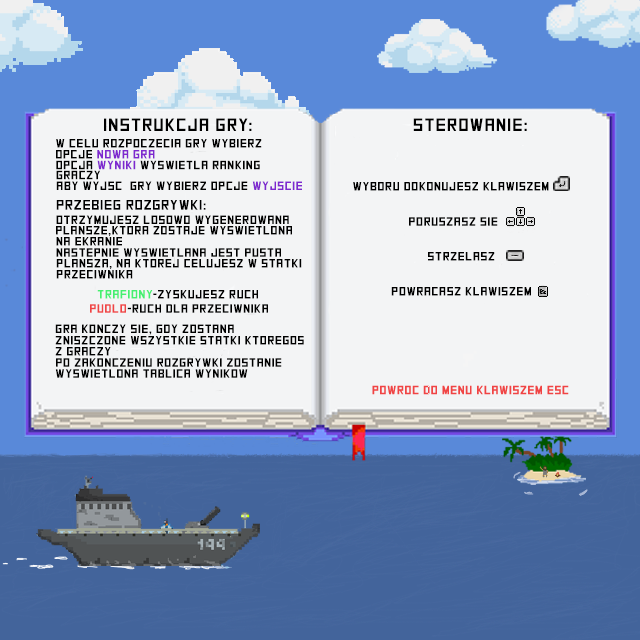
<style>
.page{position:relative;width:640px;height:640px;background:#f3f4f5}
.page>*{position:absolute;margin:0}
.t1{font:18px "SquareFont";letter-spacing:0.05em;color:#000000;text-transform:uppercase}
.t2{font:12px "SquareFont";letter-spacing:0.05em;color:#7e28cf;text-transform:uppercase}
.t3{font:12px "SquareFont";letter-spacing:0.05em;color:#000000;text-transform:uppercase}
.t4{font:14px "SquareFont";letter-spacing:0.05em;color:#000000;text-transform:uppercase}
.t5{font:12px "SquareFont";letter-spacing:0.05em;color:#44f070;text-transform:uppercase}
.t6{font:12px "SquareFont";letter-spacing:0.05em;color:#f04444;text-transform:uppercase}
</style>
<div class="page">
<p class="t1" style="left:104px;top:118px;width:148px;height:13px">INSTRUKCJA GRY:</p>
<p class="t1" style="left:413px;top:118px;width:114px;height:13px">sterowanie:</p>
<p class="t2" style="left:56px;top:150px;width:99px;height:9px"><span class="t3">opcje </span>nowa gra</p>
<p class="t3" style="left:56px;top:139px;width:206px;height:9px">W celu rozpoczecia gry wybierz</p>
<p class="t3" style="left:56px;top:160px;width:204px;height:10px">Opcja <span class="t2">wyniki</span> wyswietla ranking</p>
<p class="t3" style="left:56px;top:170px;width:44px;height:10px">graczy</p>
<p class="t3" style="left:56px;top:181px;width:246px;height:9px">aby wyjsc  gry wybierz opcje<span class="t2"> wyjscie</span></p>
<p class="t3" style="left:353px;top:182px;width:196px;height:9px">Wyboru dokonujesz klawiszem</p>
<p class="t4" style="left:56px;top:200px;width:150px;height:10px">Przebieg rozgrywki:</p>
<p class="t3" style="left:56px;top:215px;width:233px;height:9px">Otrzymujesz losowo wygenerowana</p>
<p class="t3" style="left:409px;top:217px;width:89px;height:9px">poruszasz sie</p>
<p class="t3" style="left:56px;top:226px;width:236px;height:10px">plansze,ktora zostaje wyswietlona</p>
<p class="t3" style="left:56px;top:237px;width:66px;height:9px">NA EKRANIE</p>
<p class="t3" style="left:56px;top:248px;width:225px;height:9px">nastepnie wyswietlana jest pusta</p>
<p class="t3" style="left:428px;top:252px;width:67px;height:9px">strzelasz</p>
<p class="t3" style="left:56px;top:270px;width:77px;height:9px">przeciwnika</p>
<p class="t3" style="left:56px;top:259px;width:246px;height:10px">plansza, na ktorej celujesz w statki</p>
<p class="t3" style="left:97px;top:290px;width:161px;height:9px"><span class="t5">Trafiony</span>-zyskujesz ruch</p>
<p class="t3" style="left:391px;top:287px;width:140px;height:9px">powracasz klawiszem</p>
<p class="t3" style="left:90px;top:304px;width:178px;height:9px"><span class="t6">Pudlo</span>-ruch dla przeciwnika</p>
<p class="t3" style="left:55px;top:324px;width:179px;height:11px">gra konczy sie, gdy zostana</p>
<p class="t3" style="left:55px;top:336px;width:249px;height:9px">zniszczone wszystkie statki ktoregos</p>
<p class="t3" style="left:55px;top:347px;width:56px;height:9px">z graczy</p>
<p class="t3" style="left:56px;top:358px;width:226px;height:9px">po zakonczeniu rozgrywki zostanie</p>
<p class="t3" style="left:55px;top:369px;width:193px;height:9px">wyswietlona tablica wynikow</p>
</div>
